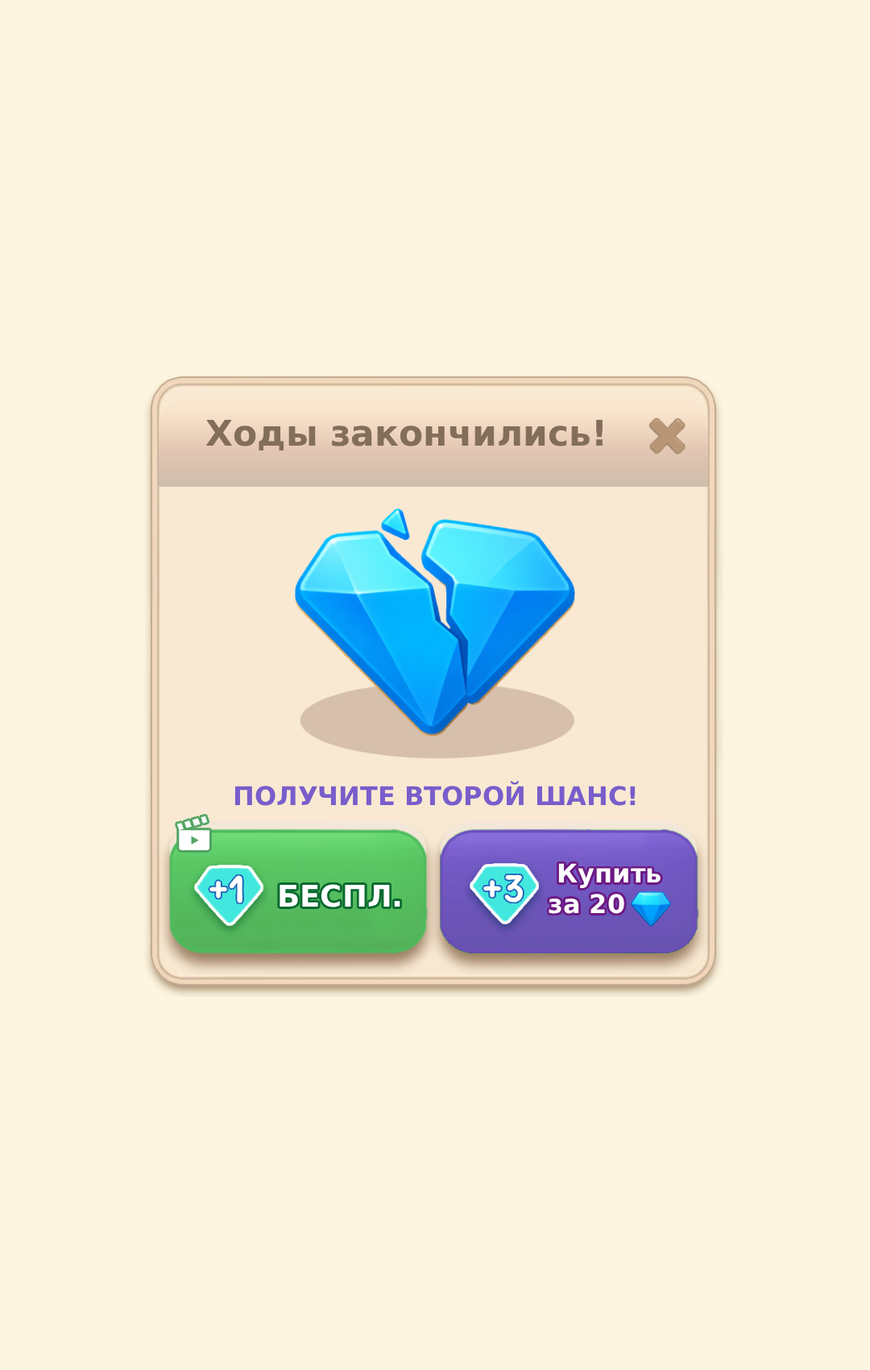
<style>
.page{position:relative;width:870px;height:1370px;background:#fdf5e0}
.page>*{position:absolute;margin:0}
.t1{font:35.5px "DejaVuSans-Bold";color:#826e5a}
.t2{font:25.8px "DejaVuSans-Bold";color:#795dcb}
.t3{font:25.8px "DejaVuSans-Bold";color:#ffffff}
.t4{font:29.8px "DejaVuSans-Bold";color:#ffffff}
</style>
<div class="page">
<p class="t1" style="left:206px;top:419px;width:397px;height:32px">Ходы закончились!</p>
<p class="t2" style="left:235px;top:781px;width:401px;height:25px">ПОЛУЧИТЕ ВТОРОЙ ШАНС!</p>
<p class="t3" style="left:549px;top:863px;width:112px;height:51px">Купить<br>за 20</p>
<p class="t4" style="left:280px;top:884px;width:121px;height:23px">БЕСПЛ.</p>
</div>
